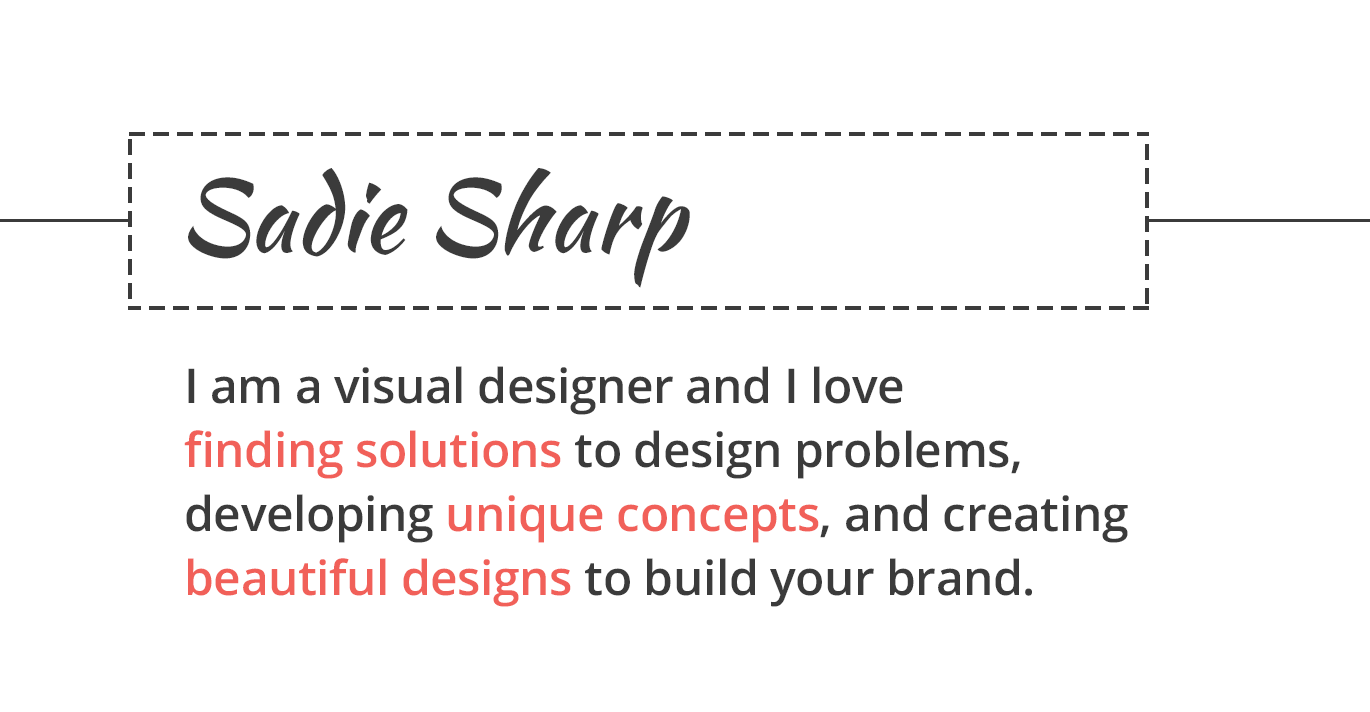
<style>
.page{position:relative;width:1370px;height:712px;background:#ffffff}
.page>*{position:absolute;margin:0}
.t1{font:100px "KaushanScript-Regular";color:#3b3b3b}
.t2{font:48px/64px "OpenSans-Semibold";letter-spacing:-0.01em;color:#3b3b3b}
.t3{font:48px/64px "OpenSans-Semibold";letter-spacing:-0.01em;color:#3b3b3b;text-transform:uppercase}
.t4{font:48px/64px "OpenSans-Semibold";letter-spacing:-0.01em;color:#f16059}
</style>
<div class="page">
<p class="t1" style="left:188px;top:168px;width:502px;height:120px">Sadie Sharp</p>
<p class="t2" style="left:184px;top:366px;width:944px;height:241px"><span class="t3">I </span>am a visual designer and I love <br><span class="t4">finding solutions</span> to design problems, developing <span class="t4">unique concepts</span>, and creating <span class="t4">beautiful designs</span> to build your brand.</p>
</div>
